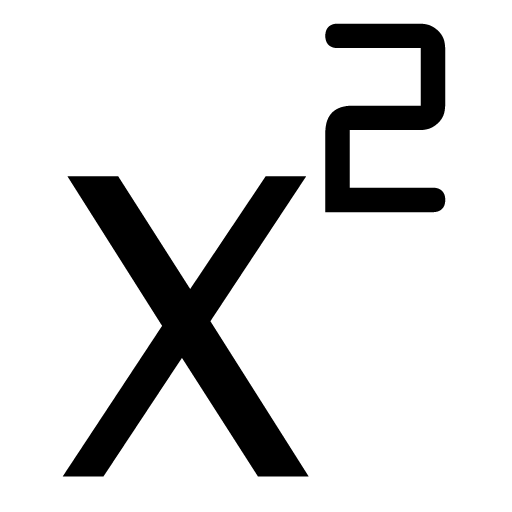
<style>
.page{position:relative;width:512px;height:512px;background:#ffffff}
.page>*{position:absolute;margin:0}
.t1{font:415px "OCRAStd";color:#000000}
.t2{font:415px "LucidaSansUnicode";color:#000000}
</style>
<div class="page">
<p class="t1" style="left:325px;top:23px;width:121px;height:190px">2</p>
<p class="t2" style="left:62px;top:176px;width:247px;height:301px">X</p>
</div>
